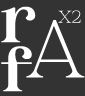
<style>
.page{position:relative;width:85px;height:96px;background:#333333}
.page>*{position:absolute;margin:0}
.t1{font:63.1px/49px "Brooklyn-SemiBold";color:#ffffff;font-weight:bold}
.t2{font:17.2px "Brooklyn-Thin";color:#ffffff;font-weight:bold}
.t3{font:80.3px "Brooklyn-Thin";color:#ffffff;font-weight:bold}
</style>
<div class="page">
<p class="t1" style="left:1px;top:6px;width:35px;height:86px">r<br>f</p>
<p class="t2" style="left:58px;top:10px;width:23px;height:13px">X2</p>
<p class="t3" style="left:26px;top:20px;width:59px;height:58px">A</p>
</div>
